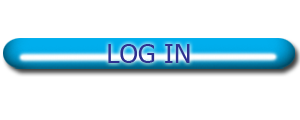
<style>
.page{position:relative;width:300px;height:120px;background:#ffffff}
.page>*{position:absolute;margin:0}
.t1{font:26.4px "Tahoma";color:#2e3190}
</style>
<div class="page">
<p class="t1" style="left:108px;top:44px;width:82px;height:19px">LOG IN</p>
</div>
